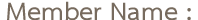
<style>
.page{position:relative;width:198px;height:20px;background:#ffffff}
.page>*{position:absolute;margin:0}
.t1{font:36px "THSarabunPSK-Bold";color:#776b5e}
</style>
<div class="page">
<p class="t1" style="left:7px;top:1px;width:184px;height:20px">Member Name :</p>
</div>
